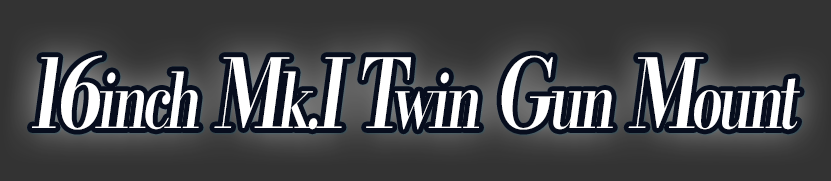
<style>
.page{position:relative;width:831px;height:181px;background:#333333}
.page>*{position:absolute;margin:0}
.t1{font:76.8px "KochoStd-Heavy";letter-spacing:-0.08em;color:#ffffff;font-style:italic;scale:0.75 1}
.t2{font:96px "KochoStd-Heavy";letter-spacing:-0.08em;color:#ffffff;font-style:italic;scale:0.75 1}
</style>
<div class="page">
<p class="t1" style="left:32px;top:55px;width:768px;height:75px"><span class="t2">16</span>inch<span class="t2"> M</span>k.<span class="t2">I T</span>win<span class="t2"> G</span>un<span class="t2"> M</span>ount</p>
</div>
